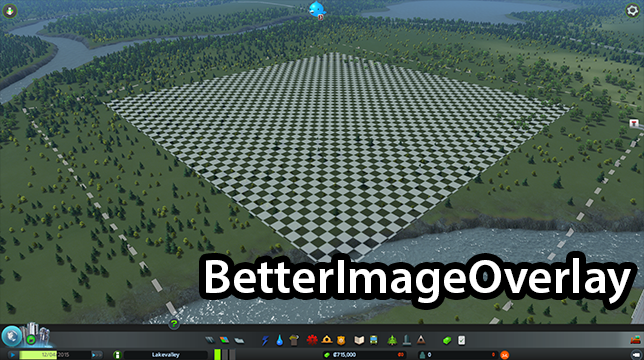
<style>
.page{position:relative;width:644px;height:360px}
.page>*{position:absolute;margin:0}
.t1{font:48.8px "MyriadPro-Semibold";color:#ffffff}
</style>
<div class="page">
<p class="t1" style="left:206px;top:258px;width:425px;height:46px">BetterImageOverlay</p>
</div>
